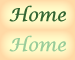
<style>
.page{position:relative;width:75px;height:60px}
.page>*{position:absolute;margin:0}
.t1{font:18px "LucidaCalligraphy-Italic";color:#336633}
.t2{font:18px "LucidaCalligraphy-Italic";color:#99cc99}
</style>
<div class="page">
<p class="t1" style="left:9px;top:5px;width:57px;height:17px">Home</p>
<p class="t2" style="left:9px;top:35px;width:57px;height:17px">Home</p>
</div>
